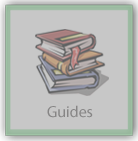
<style>
.page{position:relative;width:138px;height:141px;background:#c7c7c7}
.page>*{position:absolute;margin:0}
.t1{font:15.9px "MyriadPro-Regular";color:#868585}
</style>
<div class="page">
<p class="t1" style="left:47px;top:105px;width:46px;height:13px">Guides</p>
</div>
